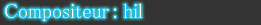
<style>
.page{position:relative;width:261px;height:25px;background:#333333}
.page>*{position:absolute;margin:0}
.t1{font:20px "MS-PMincho";color:#ffffff}
.t2{font:20px "MS-PMincho";letter-spacing:-0.05em;color:#ffffff}
</style>
<div class="page">
<p class="t1" style="left:5px;top:3px;width:138px;height:18px">Compositeur <span class="t2">:</span> hil</p>
</div>
